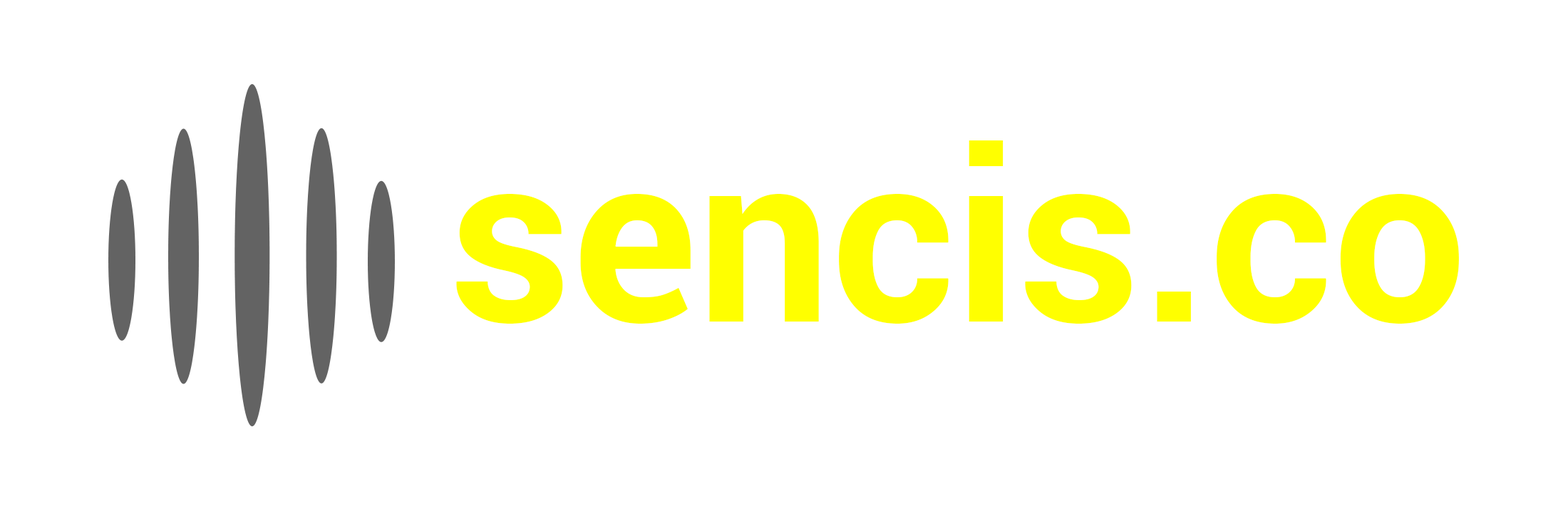
<style>
.page{position:relative;width:1568px;height:509px;background:#ffffff}
.page>*{position:absolute;margin:0}
.t1{font:237.6px "Roboto-Bold";color:#ffff00}
</style>
<div class="page">
<p class="t1" style="left:456px;top:140px;width:1003px;height:184px">sencis.co</p>
</div>
